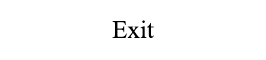
<style>
.page{position:relative;width:266px;height:60px;background:#ffffff}
.page>*{position:absolute;margin:0}
.t1{font:25px "TimesNewRomanPSMT";color:#000000}
</style>
<div class="page">
<p class="t1" style="left:112px;top:20px;width:42px;height:18px">Exit</p>
</div>
